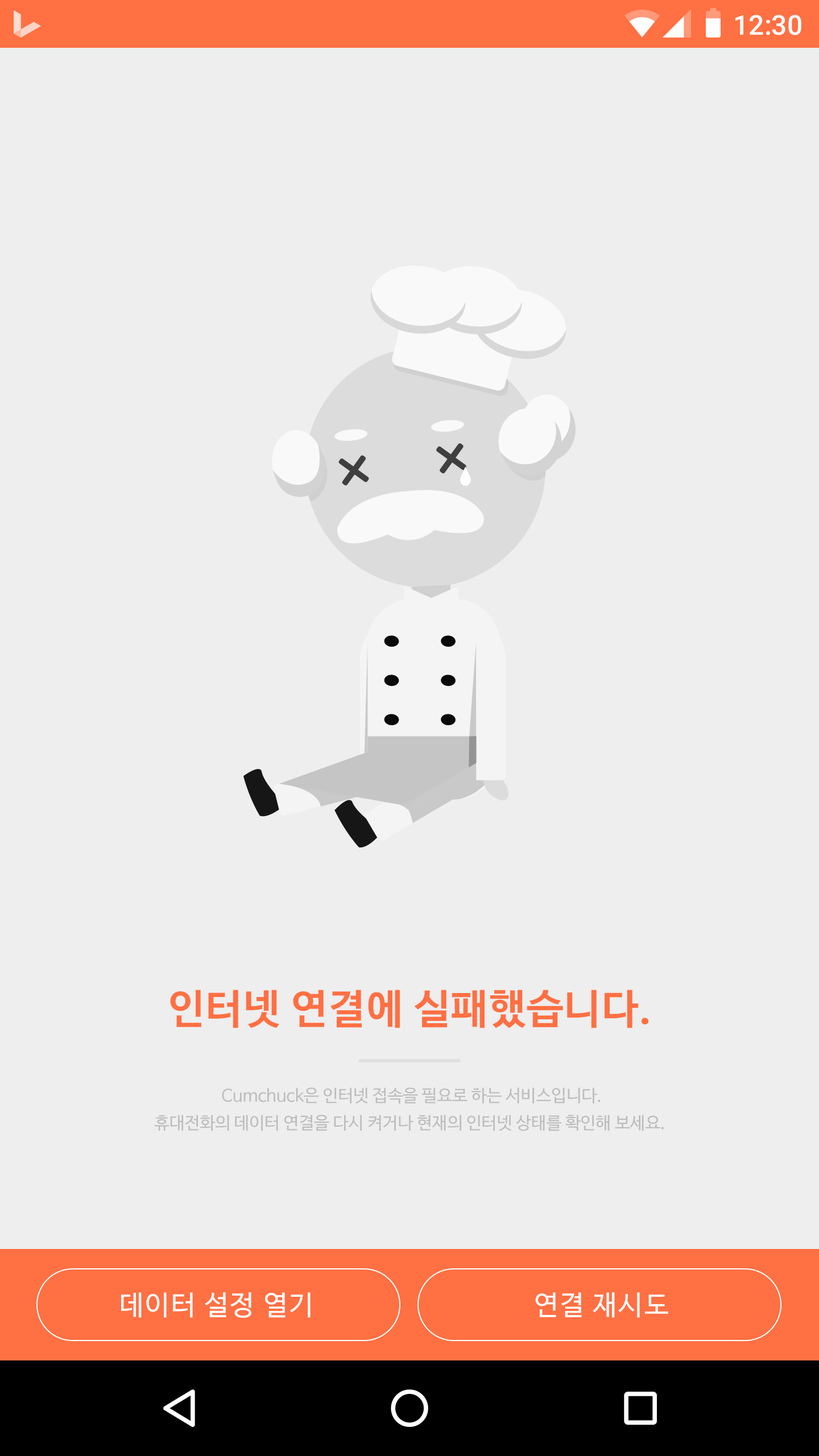
<style>
.page{position:relative;width:819px;height:1456px;background:#eeeeee}
.page>*{position:absolute;margin:0}
.t1{font:27.3px "Roboto-Medium";color:#ffffff}
.t2{font:40.9px "NanumBarunGothicBold";letter-spacing:0.025em;color:#ff7043}
.t3{font:17.1px/27.3px "NanumBarunGothic";color:#bdbdbd}
.t4{font:27.3px "NanumBarunGothic";letter-spacing:0.05em;color:#ffffff}
</style>
<div class="page">
<p class="t1" style="left:735px;top:15px;width:66px;height:20px">12:30</p>
<p class="t2" style="left:170px;top:990px;width:479px;height:38px">인터넷 연결에 실패했습니다.</p>
<p class="t3" style="left:154px;top:1087px;width:510px;height:44px;text-align:center">Cumchuck은 인터넷 접속을 필요로 하는 서비스입니다.<br>휴대전화의 데이터 연결을 다시 켜거나 현재의 인터넷 상태를 확인해 보세요.</p>
<p class="t4" style="left:121px;top:1292px;width:190px;height:26px">데이터 설정 열기</p>
<p class="t4" style="left:535px;top:1292px;width:133px;height:26px">연결 재시도</p>
</div>
